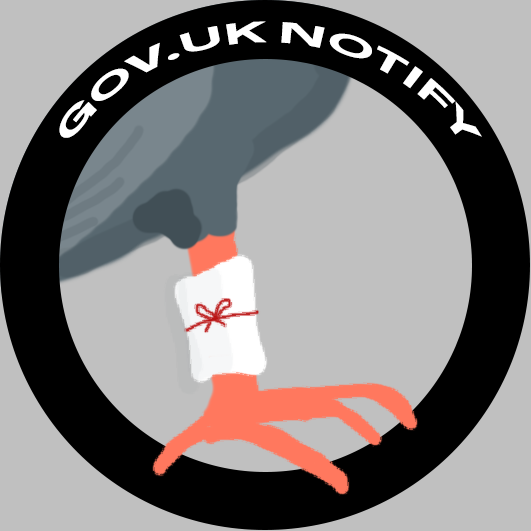
<style>
.page{position:relative;width:531px;height:531px;background:#c0c0c0}
.page>*{position:absolute;margin:0}
.t1{font:28.3px "GDSTransportWebsite-Bold";color:#ffffff}
</style>
<div class="page">
<p class="t1" style="left:59px;top:21px;width:423px;height:117px;text-align:center">GOV.UK NOTIFY</p>
</div>
